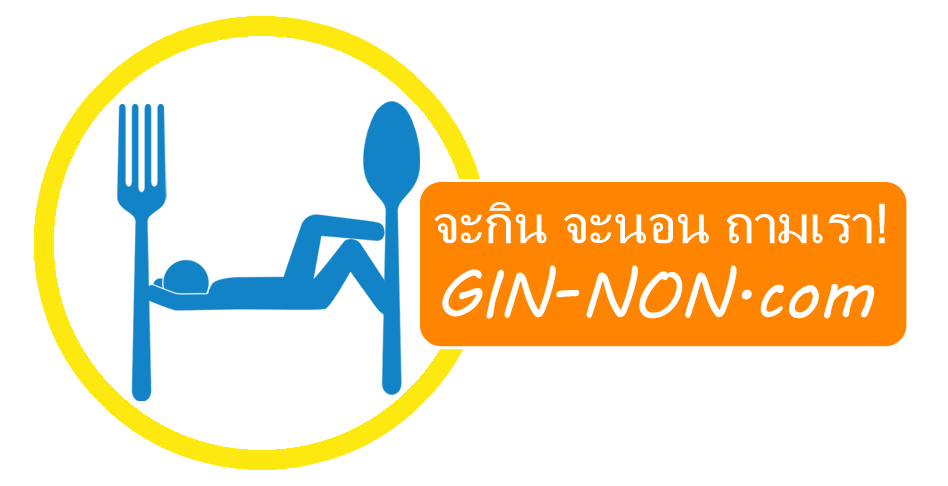
<style>
.page{position:relative;width:948px;height:486px;background:#ffffff}
.page>*{position:absolute;margin:0}
.t1{font:54.7px "MicrosoftSansSerif";color:#ffffff}
.t2{font:65.7px "MVBoli";color:#ffffff}
</style>
<div class="page">
<p class="t1" style="left:434px;top:202px;width:451px;height:42px">จะกิน จะนอน ถามเรา!</p>
<p class="t2" style="left:442px;top:265px;width:433px;height:54px">GIN-NON.com</p>
</div>
